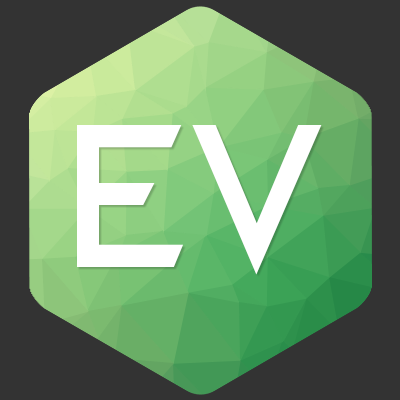
<style>
.page{position:relative;width:400px;height:400px;background:#333333}
.page>*{position:absolute;margin:0}
.t1{font:244.8px "ChargerExBd";letter-spacing:0.04em;color:#ffffff;scale:0.92 1}
</style>
<div class="page">
<p class="t1" style="left:77px;top:125px;width:245px;height:150px">EV</p>
</div>
